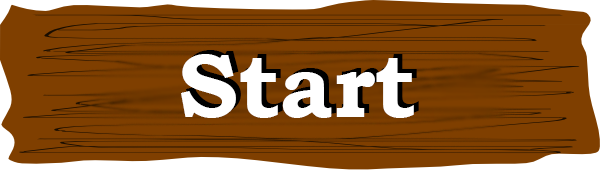
<style>
.page{position:relative;width:600px;height:170px;background:#7f3f00}
.page>*{position:absolute;margin:0}
.t1{font:91.1px "BookmanOldStyle-Bold";color:#ffffff}
.t2{font:91.1px "BookmanOldStyle-Bold"}
</style>
<div class="page">
<p class="t1" style="left:181px;top:54px;width:233px;height:64px">Start</p>
<p class="t2" style="left:186px;top:50px;width:233px;height:64px">Start</p>
</div>
